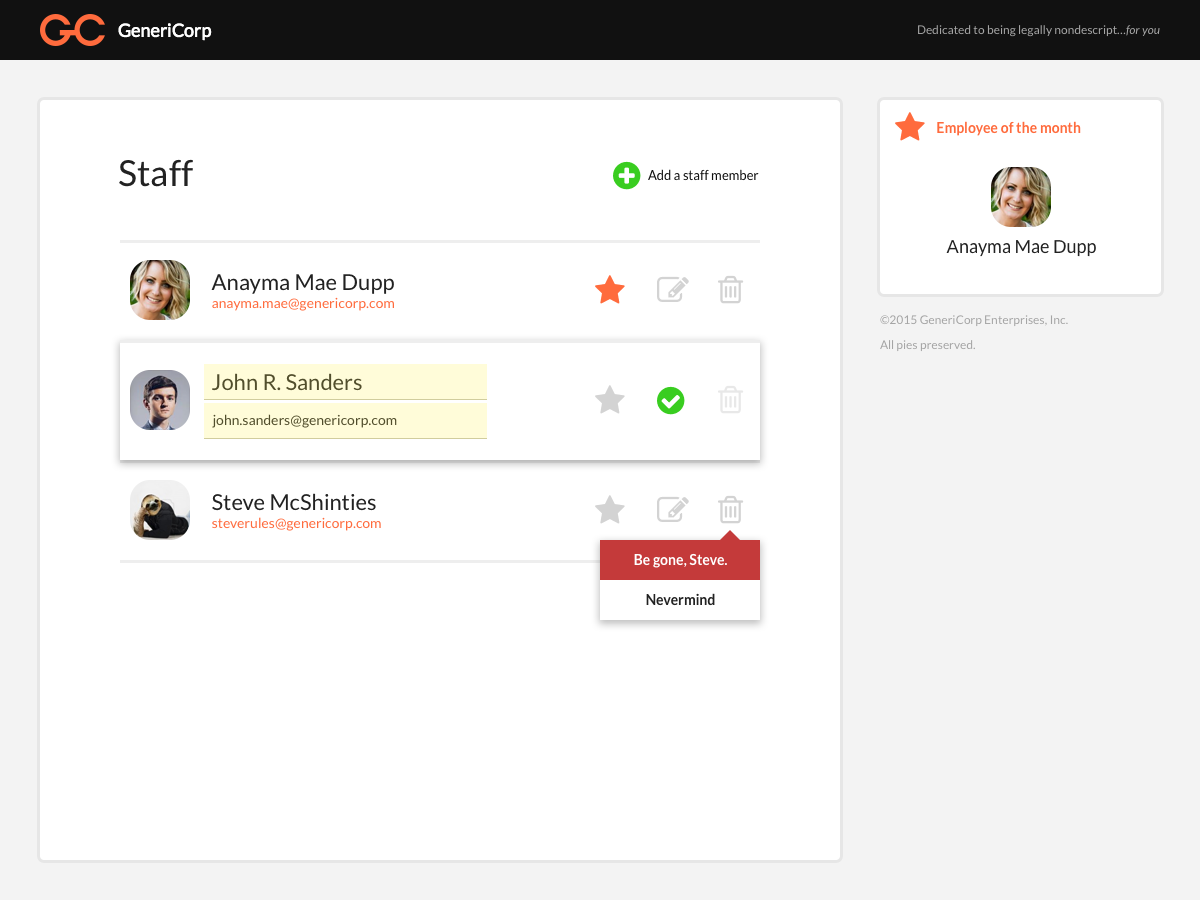
<style>
.page{position:relative;width:1200px;height:900px;background:#ffffff}
.page>*{position:absolute;margin:0}
.t1{font:18px "Lato-Regular";color:#ffffff}
.t2{font:12px "Lato-Regular";color:#a5a5a5}
.t3{font:12px "Lato-Italic";color:#a5a5a5}
.t4{font:14px "Lato-Bold";color:#ff6b3d}
.t5{font:36px "Lato-Regular";color:#222222}
.t6{font:13px "Lato-Regular";color:#111111}
.t7{font:18px "Lato-Regular";color:#222222}
.t8{font:22px "Lato-Regular";color:#222222}
.t9{font:14px "Lato-Regular";color:#ff6b3d}
.t10{font:12px/25px "Lato-Regular";color:#a5a5a5}
.t11{font:22px "Lato-Regular";color:#514e2c}
.t12{font:14px "Lato-Regular";color:#514e2c}
.t13{font:14px "Lato-Bold";color:#ffffff}
.t14{font:14px "Lato-Bold";color:#222222}
</style>
<div class="page">
<p class="t1" style="left:118px;top:23px;width:94px;height:18px">GeneriCorp</p>
<p class="t2" style="left:918px;top:25px;width:242px;height:12px">Dedicated to being legally nondescript…<span class="t3">for you</span></p>
<p class="t4" style="left:937px;top:121px;width:144px;height:15px">Employee of the month</p>
<p class="t5" style="left:119px;top:159px;width:74px;height:28px">Staff</p>
<p class="t6" style="left:648px;top:169px;width:111px;height:12px">Add a staff member</p>
<p class="t7" style="left:946px;top:240px;width:150px;height:17px">Anayma Mae Dupp</p>
<p class="t8" style="left:211px;top:274px;width:183px;height:20px">Anayma Mae Dupp</p>
<p class="t9" style="left:212px;top:297px;width:182px;height:14px">anayma.mae@genericorp.com</p>
<p class="t10" style="left:880px;top:315px;width:188px;height:37px">©2015 GeneriCorp Enterprises, Inc.<br>All pies preserved.</p>
<p class="t11" style="left:212px;top:373px;width:150px;height:18px">John R. Sanders</p>
<p class="t12" style="left:212px;top:414px;width:185px;height:14px">john.sanders@genericorp.com</p>
<p class="t8" style="left:212px;top:493px;width:164px;height:18px">Steve McShinties</p>
<p class="t9" style="left:212px;top:517px;width:169px;height:14px">steverules@genericorp.com</p>
<p class="t13" style="left:634px;top:553px;width:93px;height:15px">Be gone, Steve.</p>
<p class="t14" style="left:646px;top:593px;width:69px;height:13px">Nevermind</p>
</div>
